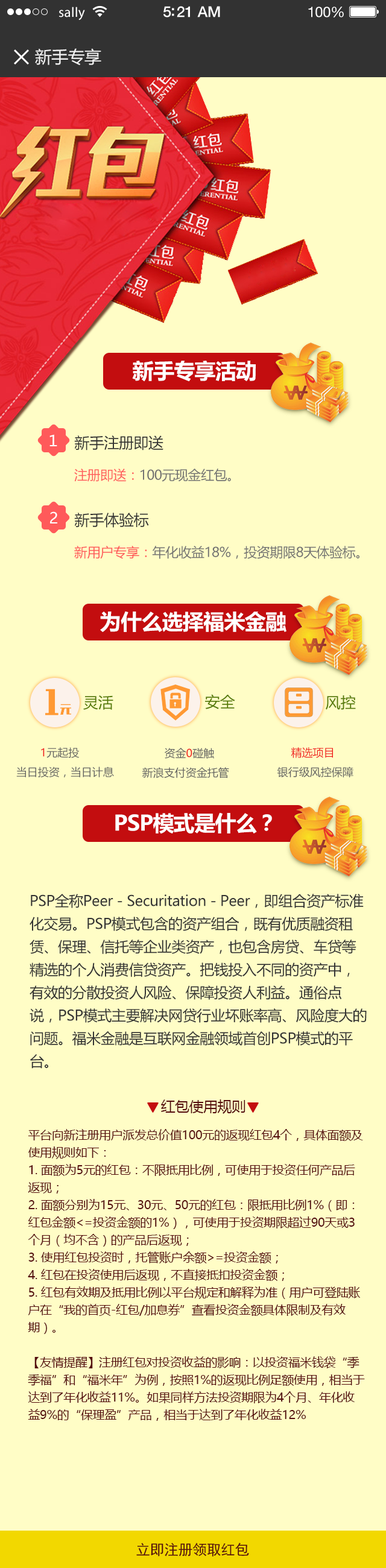
<style>
.page{position:relative;width:386px;height:1568px;background:#fffdc6}
.page>*{position:absolute;margin:0}
.t1{font:13.9px "MyriadPro-Regular";letter-spacing:0.02em;color:#ffffff}
.t2{font:15.1px "HelveticaNeue-Medium";letter-spacing:-0.02em;color:#ffffff}
.t3{font:14.5px "HelveticaNeue";letter-spacing:-0.02em;color:#ffffff}
.t4{font:16.9px "MicrosoftYaHei";letter-spacing:-0.02em;color:#f3f3f3}
.t5{font:21.1px "MicrosoftYaHei-Bold";letter-spacing:-0.02em;color:#ffffff}
.t6{font:15.1px "MicrosoftYaHei";letter-spacing:-0.02em;color:#ffffff}
.t7{font:15.1px "MicrosoftYaHei";letter-spacing:-0.02em;color:#333333}
.t8{font:13.3px "MicrosoftYaHei";letter-spacing:-0.02em;color:#727272}
.t9{font:13.3px "MicrosoftYaHei";letter-spacing:-0.02em;color:#ff5a5a}
.t10{font:15.1px "MicrosoftYaHei";color:#567b06}
.t11{font:10.9px "MicrosoftYaHei";color:#626262}
.t12{font:10.9px "MicrosoftYaHei";color:#f01b1b}
.t13{font:14.5px/22.9px "MicrosoftYaHei";letter-spacing:-0.02em;color:#333333}
.t14{font:14.5px "MicrosoftYaHei";letter-spacing:-0.02em;color:#550d0d}
.t15{font:12.1px/17.5px "MicrosoftYaHei";letter-spacing:-0.02em;color:#550d0d}
.t16{font:14.5px "SimHei";letter-spacing:-0.02em;color:#550d0d}
</style>
<div class="page">
<p class="t1" style="left:59px;top:7px;width:26px;height:14px">sally</p>
<p class="t2" style="left:163px;top:6px;width:57px;height:11px">5:21 AM</p>
<p class="t3" style="left:308px;top:7px;width:36px;height:10px">100%</p>
<p class="t4" style="left:35px;top:48px;width:66px;height:17px">新手专享</p>
<p class="t5" style="left:132px;top:361px;width:124px;height:21px">新手专享活动</p>
<p class="t6" style="left:49px;top:434px;width:8px;height:12px">１</p>
<p class="t7" style="left:74px;top:435px;width:89px;height:15px">新手注册即送</p>
<p class="t8" style="left:74px;top:469px;width:157px;height:13px"><span class="t9">注册即送：</span>100元现金红包。</p>
<p class="t6" style="left:50px;top:511px;width:7px;height:12px">2</p>
<p class="t7" style="left:74px;top:513px;width:75px;height:15px">新手体验标</p>
<p class="t8" style="left:74px;top:546px;width:285px;height:13px"><span class="t9">新用户专享：</span>年化收益18%，投资期限8天体验标。</p>
<p class="t5" style="left:100px;top:611px;width:186px;height:21px">为什么选择福米金融</p>
<p class="t10" style="left:83px;top:695px;width:30px;height:15px">灵活</p>
<p class="t10" style="left:205px;top:694px;width:30px;height:15px">安全</p>
<p class="t10" style="left:326px;top:695px;width:30px;height:15px">风控</p>
<p class="t11" style="left:41px;top:747px;width:39px;height:11px"><span class="t12">1</span>元起投</p>
<p class="t11" style="left:165px;top:748px;width:49px;height:11px">资金<span class="t12">0</span>碰触</p>
<p class="t12" style="left:291px;top:747px;width:42px;height:11px">精选项目</p>
<p class="t11" style="left:16px;top:767px;width:98px;height:10px">当日投资，当日计息</p>
<p class="t11" style="left:142px;top:767px;width:87px;height:11px">新浪支付资金托管</p>
<p class="t11" style="left:277px;top:767px;width:76px;height:10px">银行级风控保障</p>
<p class="t5" style="left:115px;top:812px;width:157px;height:22px">PSP模式是什么？</p>
<p class="t13" style="left:30px;top:894px;width:337px;height:175px">PSP全称Peer - Securitation - Peer，即组合资产标准化交易。PSP模式包含的资产组合，既有优质融资租赁、保理、信托等企业类资产，也包含房贷、车贷等精选的个人消费信贷资产。把钱投入不同的资产中，有效的分散投资人风险、保障投资人利益。通俗点说，PSP模式主要解决网贷行业坏账率高、风险度大的问题。福米金融是互联网金融领域首创PSP模式的平台。</p>
<p class="t14" style="left:161px;top:1099px;width:84px;height:15px">红包使用规则</p>
<p class="t15" style="left:28px;top:1129px;width:337px;height:292px">平台向新注册用户派发总价值100元的返现红包4个，具体面额及使用规则如下：<br>1. 面额为5元的红包：不限抵用比例，可使用于投资任何产品后返现；<br>2. 面额分别为15元、30元、50元的红包：限抵用比例1%（即：红包金额&lt;=投资金额的1%），可使用于投资期限超过90天或3个月（均不含）的产品后返现；<br>3. 使用红包投资时，托管账户余额&gt;=投资金额；<br>4. 红包在投资使用后返现，不直接抵扣投资金额；<br>5. 红包有效期及抵用比例以平台规定和解释为准（用户可登陆账户在“我的首页-红包/加息券”查看投资金额具体限制及有效期）。<br><br>【友情提醒】注册红包对投资收益的影响：以投资福米钱袋“季季福”和“福米年”为例，按照1%的返现比例足额使用，相当于达到了年化收益11%。如果同样方法投资期限为4个月、年化收益9%的“保理盈”产品，相当于达到了年化收益12%</p>
<p class="t16" style="left:136px;top:1543px;width:113px;height:14px">立即注册领取红包</p>
</div>
